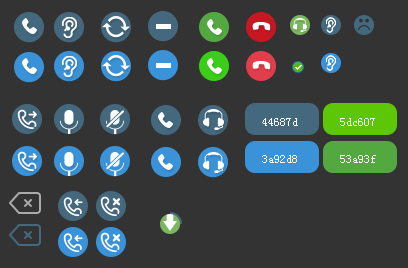
<style>
.page{position:relative;width:408px;height:268px;background:#333333}
.page>*{position:absolute;margin:0}
.t1{font:12px "SimSun";color:#ffffff}
</style>
<div class="page">
<p class="t1" style="left:262px;top:118px;width:36px;height:8px">44687d</p>
<p class="t1" style="left:340px;top:118px;width:35px;height:8px">5dc607</p>
<p class="t1" style="left:262px;top:155px;width:35px;height:8px">3a92d8</p>
<p class="t1" style="left:340px;top:155px;width:36px;height:8px">53a93f</p>
</div>
